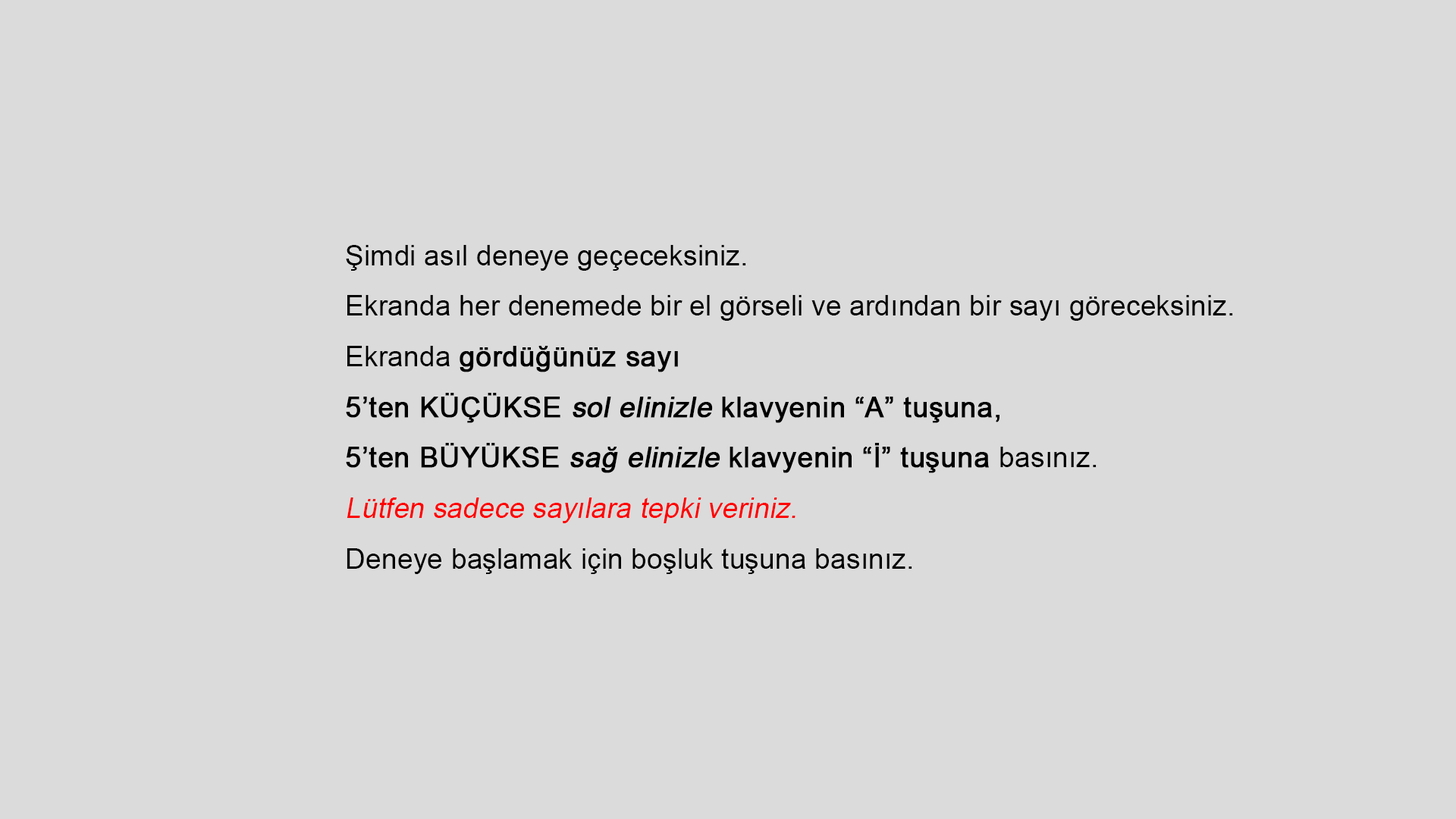
<style>
.page{position:relative;width:1456px;height:819px;background:#dbdbdb}
.page>*{position:absolute;margin:0}
.t1{font:28.4px/50.6px "ArialMT";color:#000000}
.t2{font:28.4px/50.6px "ArialMT";color:#000000;font-weight:bold}
.t3{font:28.4px/50.6px "ArialMT";color:#000000;font-weight:bold;font-style:italic}
.t4{font:28.4px/50.6px "ArialMT";color:#ff0000;font-style:italic}
</style>
<div class="page">
<p class="t1" style="left:346px;top:245px;width:887px;height:329px">Şimdi asıl deneye geçeceksiniz.<br>Ekranda her denemede bir el görseli ve ardından bir sayı göreceksiniz.<br>Ekranda <span class="t2">gördüğünüz sayı <br>5’ten KÜÇÜKSE </span><span class="t3">sol elinizle </span><span class="t2">klavyenin “A” tuşuna,<br>5’ten BÜYÜKSE </span><span class="t3">sağ elinizle </span><span class="t2">klavyenin “İ” tuşuna </span>basınız.<br><span class="t4">Lütfen sadece sayılara tepki veriniz.<br></span>Deneye başlamak için boşluk tuşuna basınız.</p>
</div>
